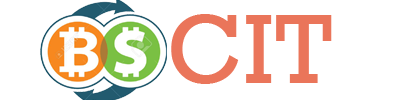
<style>
.page{position:relative;width:420px;height:100px;background:#ffffff}
.page>*{position:absolute;margin:0}
.t1{font:100px "Rockwell";color:#ea755a}
</style>
<div class="page">
<p class="t1" style="left:171px;top:14px;width:161px;height:70px">CIT</p>
</div>
